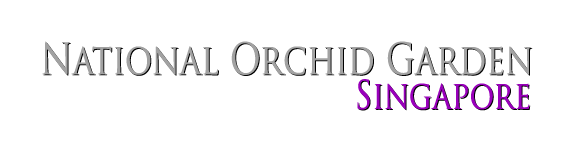
<style>
.page{position:relative;width:573px;height:150px;background:#ffffff}
.page>*{position:absolute;margin:0}
.t1{font:42.4px "TrajanPro-Regular";color:#a2a2a2;scale:0.8 1}
.t2{font:38.5px "TrajanPro-Regular";color:#9900bb;scale:0.8 1}
</style>
<div class="page">
<p class="t1" style="left:42px;top:41px;width:490px;height:34px">National Orchid Garden</p>
<p class="t2" style="left:357px;top:79px;width:173px;height:31px">Singapore</p>
</div>
